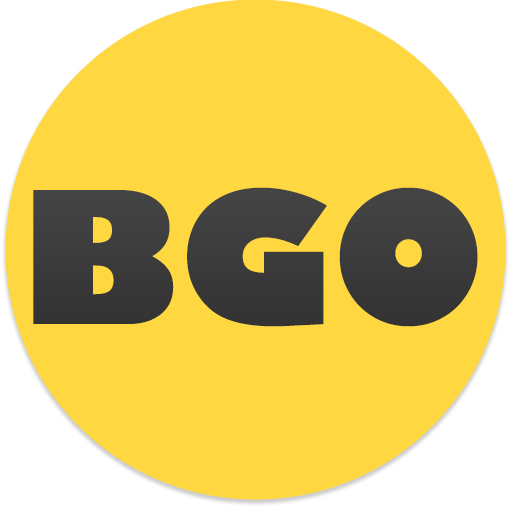
<style>
.page{position:relative;width:512px;height:512px;background:#ffd740}
.page>*{position:absolute;margin:0}
.t1{font:180px "GillSans-UltraBold";color:#3b3b3b}
</style>
<div class="page">
<p class="t1" style="left:33px;top:187px;width:445px;height:140px">BGO</p>
</div>
